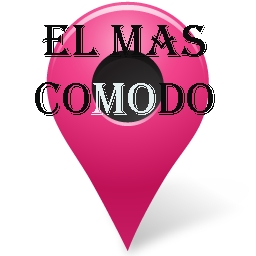
<style>
.page{position:relative;width:256px;height:256px;background:#ffffff}
.page>*{position:absolute;margin:0}
.t1{font:48px "Algerian";color:#0b0c0c}
.t2{font:48px "Algerian";color:#e4eff0}
</style>
<div class="page">
<p class="t1" style="left:35px;top:25px;width:180px;height:91px;text-align:center">El mas<br>co<span class="t2">mo</span>do</p>
</div>
